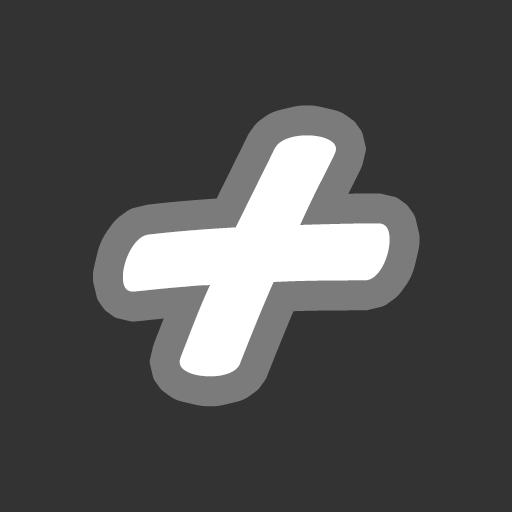
<style>
.page{position:relative;width:512px;height:512px;background:#333333}
.page>*{position:absolute;margin:0}
.t1{font:800.1px "Kinescope";color:#ffffff}
</style>
<div class="page">
<p class="t1" style="left:123px;top:135px;width:267px;height:242px">+</p>
</div>
